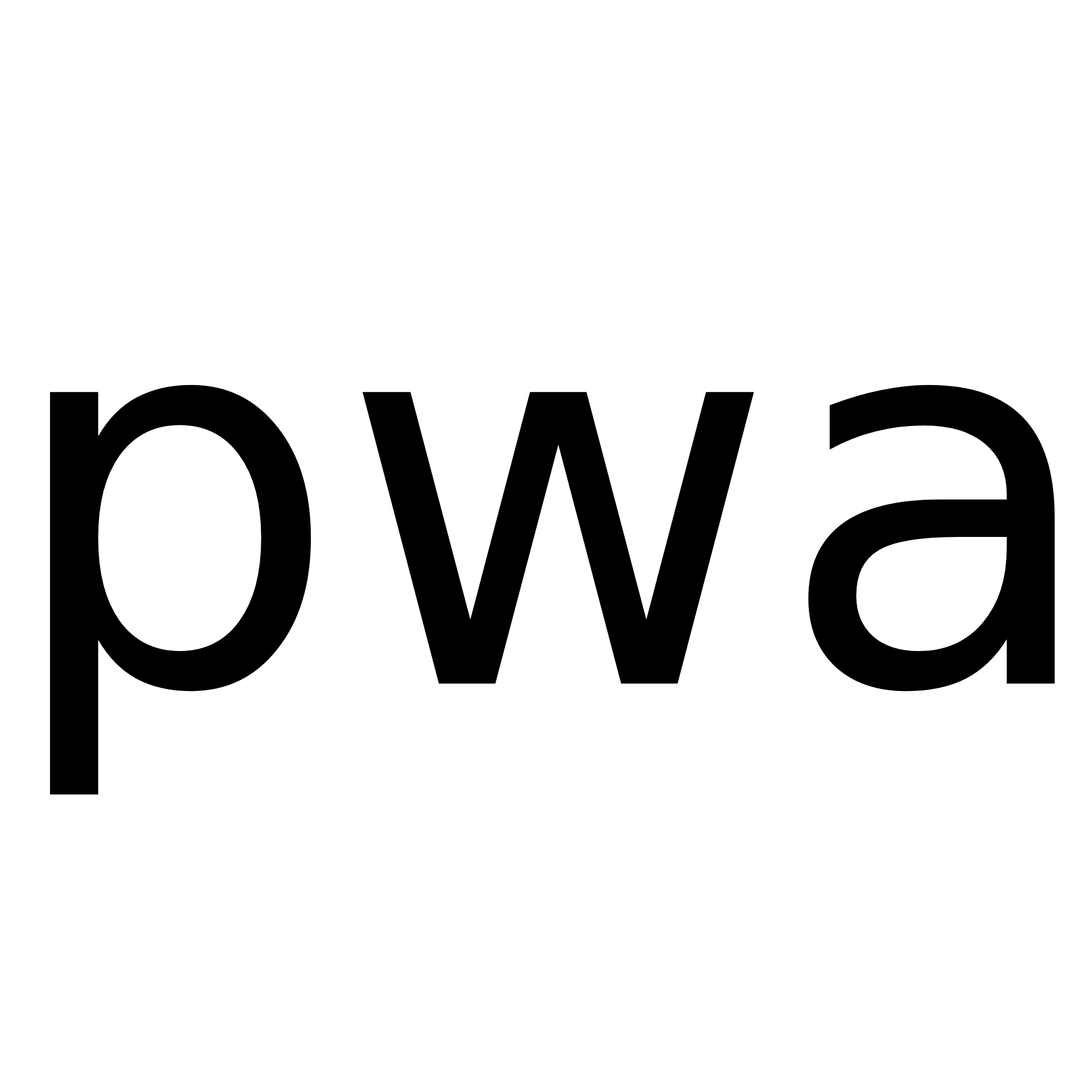
<style>
.page{position:relative;width:1092px;height:1092px;background:#ffffff}
.page>*{position:absolute;margin:0}
.t1{font:533.2px "DejaVuSans";color:#000000}
</style>
<div class="page">
<p class="t1" style="left:50px;top:384px;width:1005px;height:411px">pwa</p>
</div>
